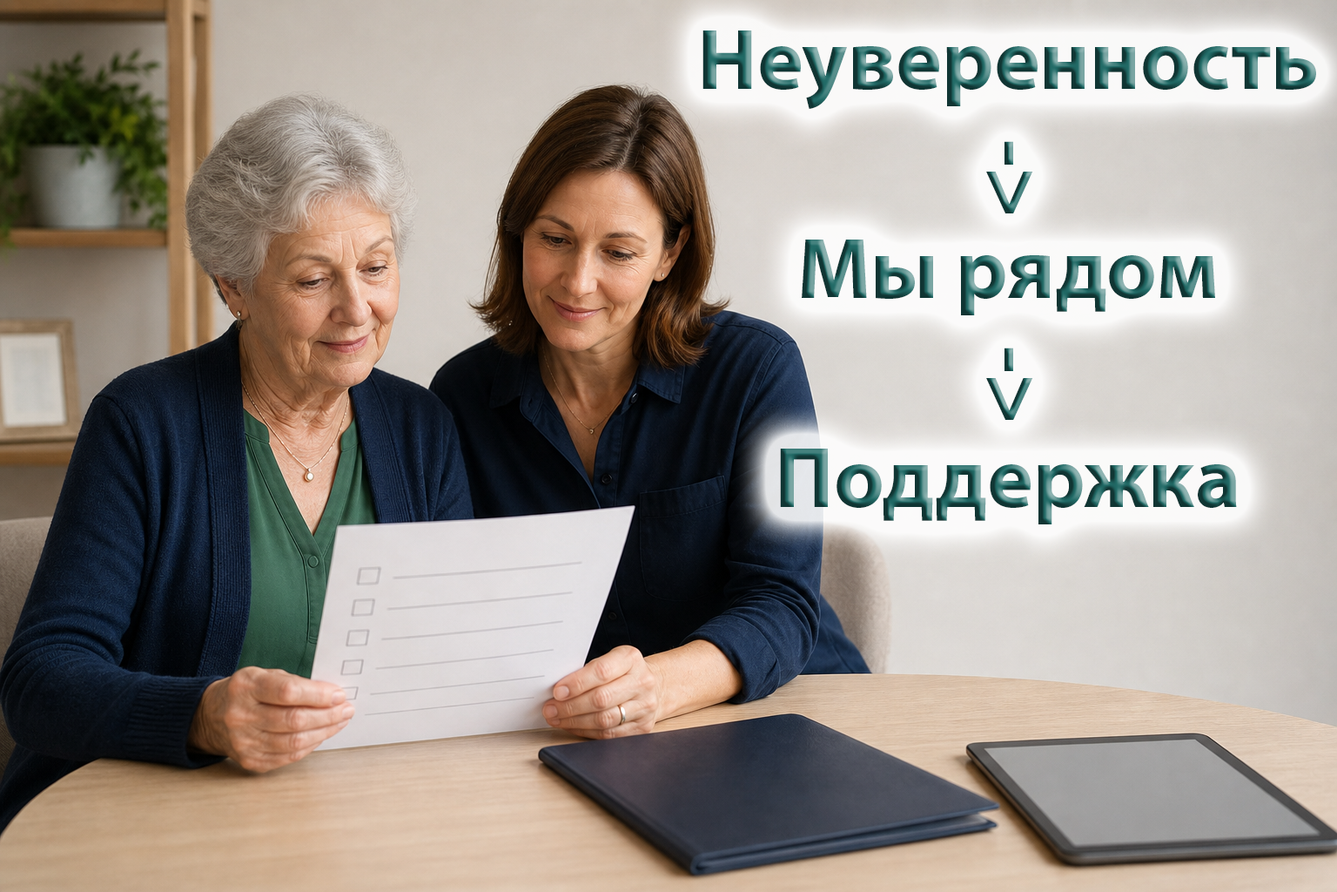
<style>
.page{position:relative;width:1337px;height:892px}
.page>*{position:absolute;margin:0}
.t1{font:87.1px "MyriadPro-Bold"}
</style>
<div class="page">
<p class="t1" style="left:703px;top:30px;width:614px;height:494px;text-align:center">Неуверенность<br> <br>Мы рядом<br> <br>Поддержка</p>
<p class="t1" style="left:987px;top:141px;width:47px;height:72px;rotate:90deg">-&gt;</p>
<p class="t1" style="left:987px;top:347px;width:47px;height:73px;rotate:90deg">-&gt;</p>
</div>
